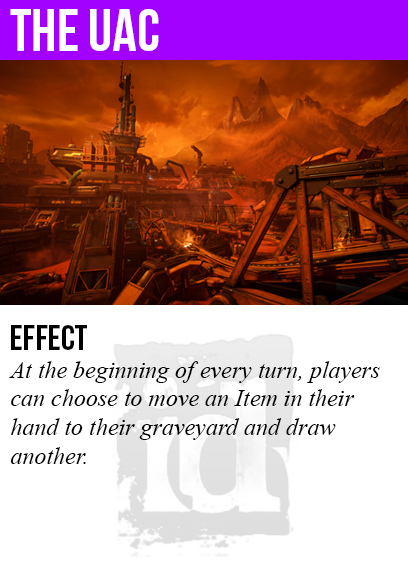
<style>
.page{position:relative;width:408px;height:585px;background:#ffffff}
.page>*{position:absolute;margin:0}
.t1{font:60px "BebasNeue";color:#ffffff}
.t2{font:36px "BebasNeue";color:#000000}
.t3{font:24px "TimesNewRomanPS-ItalicMT";color:#000000}
</style>
<div class="page">
<p class="t1" style="left:10px;top:9px;width:149px;height:42px">the uac</p>
<p class="t2" style="left:11px;top:325px;width:76px;height:25px">Effect</p>
<p class="t3" style="left:9px;top:361px;width:371px;height:103px">At the beginning of every turn, players<br>can choose to move an Item in their<br>hand to their graveyard and draw<br>another.</p>
</div>
